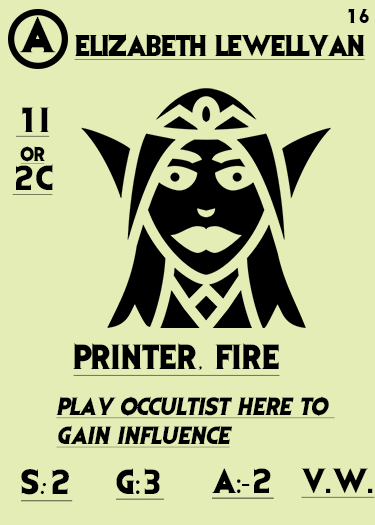
<style>
.page{position:relative;width:375px;height:525px;background:#e3edb5}
.page>*{position:absolute;margin:0}
.t1{font:41.7px "EvilDead";letter-spacing:-0.05em;color:#000000}
.t2{font:16.7px "EvilDead";letter-spacing:-0.05em;color:#000000}
.t3{font:25px "EvilDead";letter-spacing:-0.025em;color:#000000;text-decoration:underline}
.t4{font:29.2px/29.2px "EvilDead";color:#000000;text-decoration:underline}
.t5{font:16.7px/29.2px "EvilDead";color:#000000;text-decoration:underline}
.t6{font:29.2px "EvilDead";color:#000000;text-decoration:underline}
.t7{font:29.2px "Fadli-Script";color:#000000;text-decoration:underline}
.t8{font:20.8px/29.2px "EvilDead";color:#000000;font-style:italic;text-decoration:underline}
.t9{font:29.2px "MyriadPro-Regular";color:#000000;text-decoration:underline}
</style>
<div class="page">
<p class="t1" style="left:19px;top:16px;width:37px;height:37px">A</p>
<p class="t2" style="left:348px;top:9px;width:21px;height:14px">16</p>
<p class="t3" style="left:74px;top:33px;width:291px;height:27px">ELIZABETH LEWELLYAN</p>
<p class="t4" style="left:12px;top:107px;width:41px;height:88px;text-align:center">1I<br><span class="t5">or<br></span>2C</p>
<p class="t6" style="left:73px;top:343px;width:207px;height:33px">PRINTER<span class="t7">,</span> FIRE</p>
<p class="t8" style="left:56px;top:396px;width:279px;height:52px">Play occultist here to <br>gain influence</p>
<p class="t6" style="left:21px;top:469px;width:52px;height:33px">S<span class="t7">:</span>2</p>
<p class="t6" style="left:116px;top:468px;width:49px;height:32px">G<span class="t9">:</span>3</p>
<p class="t9" style="left:211px;top:468px;width:63px;height:31px"><span class="t6">A</span>:-<span class="t6">2</span></p>
<p class="t6" style="left:301px;top:468px;width:74px;height:30px">V.W.</p>
</div>
